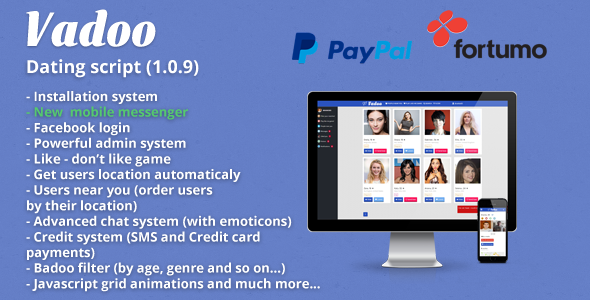
<style>
.page{position:relative;width:590px;height:300px}
.page>*{position:absolute;margin:0}
.t1{font:48px "InkredibleOne";color:#ffffff}
.t2{font:18px "OpenSans-Bold";color:#ffffff}
.t3{font:13px "OpenSans-Bold";color:#ffffff}
.t4{font:13px "OpenSans-Bold";color:#55c96e}
</style>
<div class="page">
<p class="t1" style="left:26px;top:9px;width:130px;height:38px">Vadoo</p>
<p class="t2" style="left:27px;top:59px;width:172px;height:19px">Dating script (1.0.9)</p>
<p class="t3" style="left:26px;top:91px;width:294px;height:201px">- Installation system<br><span class="t4">- New  mobile messenger<br></span>- Facebook login<br>- Powerful admin system<br>- Like - don’t like game<br>- Get users location automaticaly<br>- Users near you (order users <br>by their location)<br>- Advanced chat system (with emoticons)<br>- Credit system (SMS and Credit card <br>payments)<br>- Badoo filter (by age, genre and so on...)<br>- Javascript grid animations and much more...</p>
</div>
